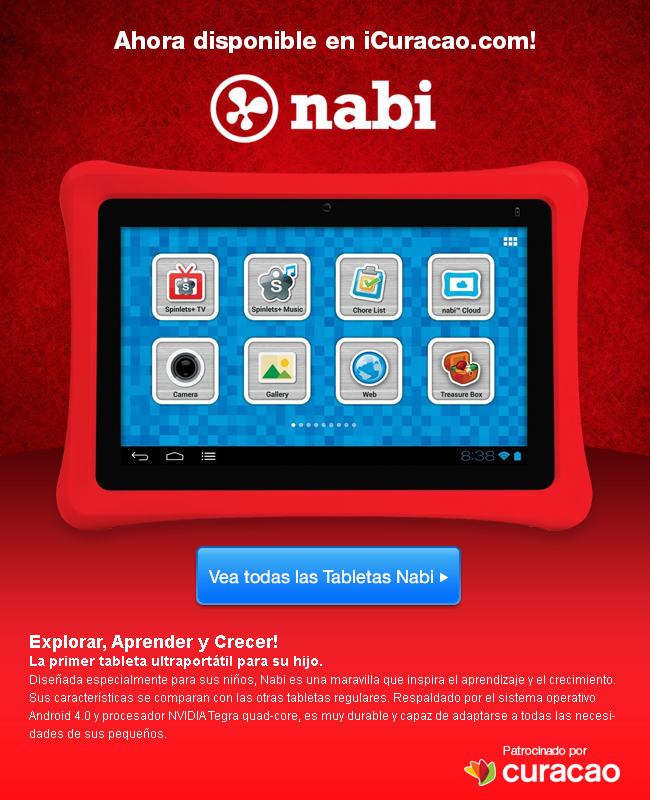
<style>
.page{position:relative;width:650px;height:800px}
.page>*{position:absolute;margin:0}
.t1{font:24px "HelveticaNeue-Heavy";color:#ffffff}
.t2{font:18px "HelveticaNeue-Roman";color:#ffffff}
.t3{font:12px/18px "ArialMT";color:#ffffff}
.t4{font:18px/18px "Arial-BoldMT";color:#ffffff}
.t5{font:14px/18px "Arial-BoldMT";color:#ffffff}
.t6{font:12px "HelveticaNeue-Light";color:#ffffff}
</style>
<div class="page">
<p class="t1" style="left:113px;top:31px;width:422px;height:22px">Ahora disponible en iCuracao.com!</p>
<p class="t2" style="left:208px;top:570px;width:225px;height:14px">Vea todas las Tabletas Nabi</p>
<p class="t3" style="left:29px;top:635px;width:586px;height:105px"><span class="t4">Explorar, Aprender y Crecer!<br></span><span class="t5">La primer tableta ultraportátil para su hijo.<br></span>Diseñada especialmente para sus niños, Nabi es una maravilla que inspira el aprendizaje y el crecimiento. Sus características se comparan con las otras tabletas regulares. Respaldado por el sistema operativo Android 4.0 y procesador NVIDIA Tegra quad-core, es muy durable y capaz de adaptarse a todas las necesidades de sus pequeños.</p>
<p class="t6" style="left:503px;top:746px;width:85px;height:11px">Patrocinado por</p>
</div>
